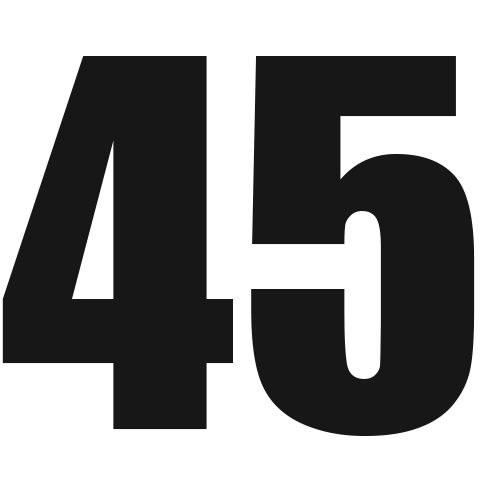
<style>
.page{position:relative;width:480px;height:480px;background:#171717}
.page>*{position:absolute;margin:0}
.t1{font:472.3px "Impact";color:#171717}
</style>
<div class="page">
<p class="t1" style="left:2px;top:56px;width:473px;height:380px">45</p>
</div>
